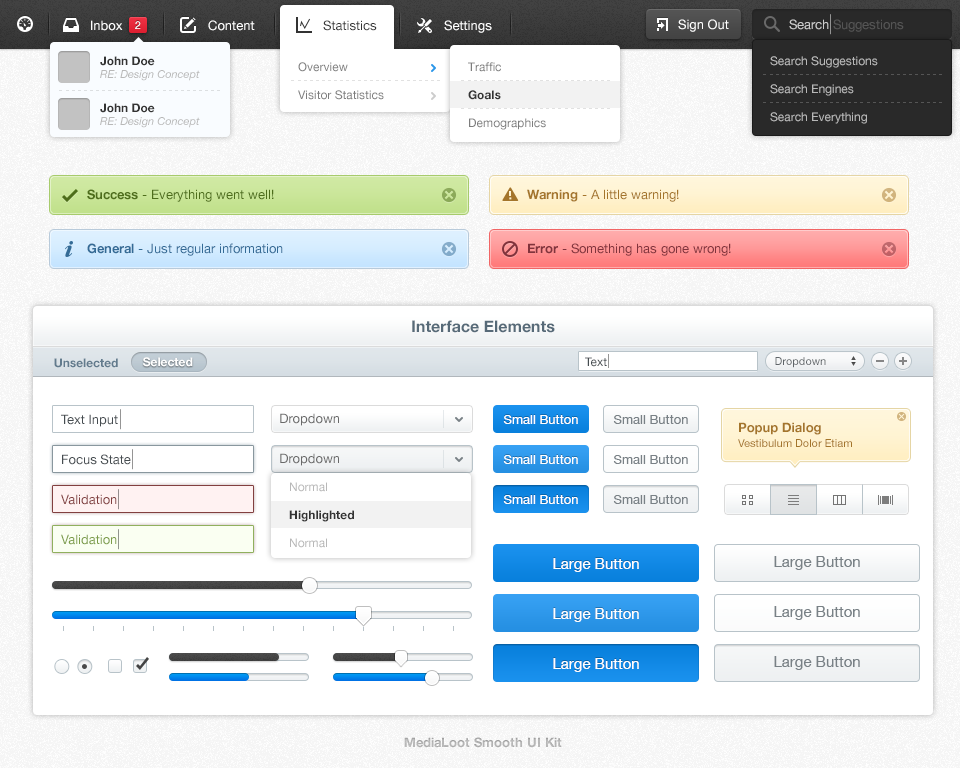
<style>
.page{position:relative;width:960px;height:768px;background:#ffffff}
.page>*{position:absolute;margin:0}
.t1{font:13px "HelveticaNeue";color:#ffffff}
.t2{font:11px "HelveticaNeue";color:#ffffff}
.t3{font:13px "HelveticaNeue";color:#343434}
.t4{font:13px "HelveticaNeue";color:#555555}
.t5{font:13px "HelveticaNeue";color:#cccccc}
.t6{font:11px/13px "HelveticaNeue-Italic";color:#b8b8b8}
.t7{font:12px/13px "HelveticaNeue-Bold";color:#333333}
.t8{font:12px/28px "HelveticaNeue";color:#7d7d7d}
.t9{font:12px/28px "HelveticaNeue-Bold";color:#333333}
.t10{font:12px/28px "HelveticaNeue";color:#b8b8b8}
.t11{font:13px "HelveticaNeue";color:#4e6e1b}
.t12{font:13px "HelveticaNeue-Bold";color:#4e6e1b}
.t13{font:13px "HelveticaNeue";color:#a4752b}
.t14{font:13px "HelveticaNeue-Bold";color:#a4752b}
.t15{font:13px "HelveticaNeue";color:#346b96}
.t16{font:13px "HelveticaNeue-Bold";color:#346b96}
.t17{font:13px "HelveticaNeue";color:#81333c}
.t18{font:13px "HelveticaNeue-Bold";color:#81333c}
.t19{font:16px "HelveticaNeue-Bold";color:#576a78}
.t20{font:12px "HelveticaNeue-Bold";color:#627b8d}
.t21{font:12px "HelveticaNeue-Bold";color:#ffffff}
.t22{font:12px "HelveticaNeue";color:#454c50}
.t23{font:11px "HelveticaNeue";color:#5f6468}
.t24{font:13px "HelveticaNeue";color:#454c50}
.t25{font:13px "HelveticaNeue";color:#696969}
.t26{font:13px "HelveticaNeue";color:#798186}
.t27{font:11px/12px "HelveticaNeue";color:#a4752b}
.t28{font:13px/10px "HelveticaNeue-Bold";color:#a4752b}
.t29{font:13px "HelveticaNeue";color:#824040}
.t30{font:13px "HelveticaNeue";color:#7b9c48}
.t31{font:15px "HelveticaNeue";color:#ffffff}
.t32{font:15px "HelveticaNeue";color:#798186}
.t33{font:13px "HelveticaNeue-Bold";color:#b5b5b5}
</style>
<div class="page">
<p class="t1" style="left:91px;top:20px;width:32px;height:11px">Inbox</p>
<p class="t2" style="left:135px;top:21px;width:6px;height:8px">2</p>
<p class="t1" style="left:208px;top:20px;width:47px;height:11px">Content</p>
<p class="t3" style="left:323px;top:20px;width:54px;height:11px">Statistics</p>
<p class="t1" style="left:444px;top:20px;width:48px;height:13px">Settings</p>
<p class="t1" style="left:678px;top:19px;width:51px;height:13px">Sign Out</p>
<p class="t4" style="left:789px;top:19px;width:115px;height:13px"><span class="t5">Search </span>Suggestions</p>
<p class="t6" style="left:100px;top:56px;width:100px;height:25px"><span class="t7">John Doe<br></span>RE: Design Concept</p>
<p class="t8" style="left:298px;top:62px;width:86px;height:38px">Overview<br>Visitor Statistics</p>
<p class="t8" style="left:468px;top:62px;width:78px;height:68px">Traffic<br><span class="t9">Goals<br></span>Demographics</p>
<p class="t10" style="left:770px;top:56px;width:108px;height:68px">Search Suggestions<br>Search Engines<br>Search Everything</p>
<p class="t6" style="left:100px;top:103px;width:100px;height:25px"><span class="t7">John Doe<br></span>RE: Design Concept</p>
<p class="t11" style="left:87px;top:189px;width:187px;height:13px"><span class="t12">Success</span> - Everything went well!</p>
<p class="t13" style="left:527px;top:189px;width:152px;height:13px"><span class="t14">Warning</span> - A little warning!</p>
<p class="t15" style="left:87px;top:243px;width:196px;height:13px"><span class="t16">General </span>- Just regular information</p>
<p class="t17" style="left:528px;top:243px;width:203px;height:13px"><span class="t18">Error</span> - Something has gone wrong!</p>
<p class="t19" style="left:412px;top:320px;width:143px;height:13px">Interface Elements</p>
<p class="t20" style="left:54px;top:358px;width:64px;height:10px">Unselected</p>
<p class="t21" style="left:143px;top:357px;width:50px;height:10px">Selected</p>
<p class="t22" style="left:585px;top:357px;width:22px;height:10px">Text</p>
<p class="t23" style="left:775px;top:357px;width:51px;height:11px">Dropdown</p>
<p class="t24" style="left:61px;top:414px;width:57px;height:13px">Text Input</p>
<p class="t25" style="left:280px;top:413px;width:59px;height:13px">Dropdown</p>
<p class="t1" style="left:503px;top:415px;width:75px;height:9px">Small Button</p>
<p class="t26" style="left:613px;top:415px;width:75px;height:9px">Small Button</p>
<p class="t27" style="left:738px;top:422px;width:114px;height:25px"><span class="t28">Popup Dialog<br></span>Vestibulum Dolor Etiam</p>
<p class="t24" style="left:62px;top:454px;width:69px;height:11px">Focus State</p>
<p class="t25" style="left:280px;top:453px;width:59px;height:13px">Dropdown</p>
<p class="t1" style="left:503px;top:455px;width:75px;height:9px">Small Button</p>
<p class="t26" style="left:613px;top:455px;width:75px;height:9px">Small Button</p>
<p class="t9" style="left:289px;top:482px;width:65px;height:66px"><span class="t10">Normal<br></span>Highlighted<br><span class="t10">Normal</span></p>
<p class="t29" style="left:61px;top:494px;width:56px;height:11px">Validation</p>
<p class="t1" style="left:503px;top:495px;width:75px;height:9px">Small Button</p>
<p class="t26" style="left:613px;top:495px;width:75px;height:9px">Small Button</p>
<p class="t30" style="left:61px;top:534px;width:56px;height:11px">Validation</p>
<p class="t31" style="left:553px;top:558px;width:86px;height:14px">Large Button</p>
<p class="t32" style="left:774px;top:556px;width:86px;height:14px">Large Button</p>
<p class="t32" style="left:774px;top:606px;width:86px;height:14px">Large Button</p>
<p class="t31" style="left:553px;top:608px;width:86px;height:14px">Large Button</p>
<p class="t31" style="left:553px;top:658px;width:86px;height:14px">Large Button</p>
<p class="t32" style="left:774px;top:656px;width:86px;height:14px">Large Button</p>
<p class="t33" style="left:404px;top:737px;width:158px;height:11px">MediaLoot Smooth UI Kit</p>
</div>
